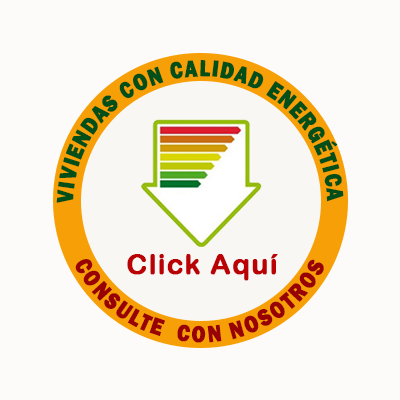
<style>
.page{position:relative;width:400px;height:400px;background:#fcfbf9}
.page>*{position:absolute;margin:0}
.t1{font:24px "FranklinGothic-Heavy";letter-spacing:0.03em;color:#024f1a;font-weight:bold;scale:0.83 1}
.t2{font:28px "ArialRoundedMTBold";letter-spacing:0.03em;color:#ba0204;font-weight:bold}
.t3{font:24px "FranklinGothic-Heavy";letter-spacing:0.03em;color:#990204;font-weight:bold;scale:0.83 1}
</style>
<div class="page">
<p class="t1" style="left:56px;top:60px;width:288px;height:143px">VIVIENDAS CON CALIDAD ENERGÉTICA</p>
<p class="t2" style="left:127px;top:254px;width:151px;height:27px">Click Aquí</p>
<p class="t3" style="left:75px;top:259px;width:249px;height:84px">CONSULTE  CON NOSOTROS</p>
</div>
